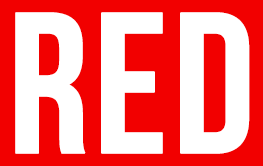
<style>
.page{position:relative;width:263px;height:166px;background:#f20000}
.page>*{position:absolute;margin:0}
.t1{font:200px "BebasNeue";color:#ffffff;text-transform:uppercase;font-weight:bold}
</style>
<div class="page">
<p class="t1" style="left:15px;top:12px;width:235px;height:142px">red</p>
</div>
